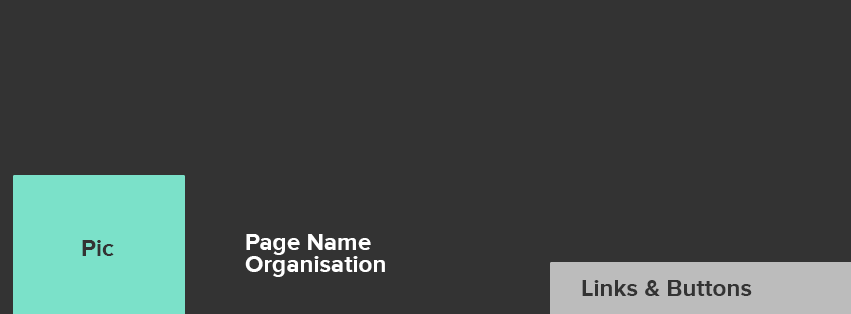
<style>
.page{position:relative;width:851px;height:314px;background:#333333}
.page>*{position:absolute;margin:0}
.t1{font:24.2px "ProximaNova-Bold";color:#333333}
.t2{font:24.2px/22.6px "ProximaNova-Bold";color:#ffffff}
.t3{font:24.2px/5.6px "ProximaNova-Bold";color:#ffffff}
</style>
<div class="page">
<p class="t1" style="left:82px;top:240px;width:32px;height:16px">Pic</p>
<p class="t2" style="left:245px;top:234px;width:140px;height:43px"><span class="t3">Page Name<br></span>Organisation</p>
<p class="t1" style="left:582px;top:280px;width:170px;height:16px">Links &amp; Buttons</p>
</div>
